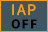
<style>
.page{position:relative;width:48px;height:32px;background:#415561}
.page>*{position:absolute;margin:0}
.t1{font:16px "SourceSansRoman-Regular";letter-spacing:0.08em;color:#ff9c00}
.t2{font:14px "SourceSansRoman-Bold";letter-spacing:0.08em;color:#000000}
</style>
<div class="page">
<p class="t1" style="left:12px;top:4px;width:24px;height:12px">IAP</p>
<p class="t2" style="left:11px;top:19px;width:26px;height:10px">OFF</p>
</div>
